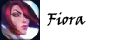
<style>
.page{position:relative;width:140px;height:40px;background:#ffffff}
.page>*{position:absolute;margin:0}
.t1{font:12px "VinerHandITC";color:#000000}
</style>
<div class="page">
<p class="t1" style="left:47px;top:12px;width:39px;height:14px">Fiora</p>
</div>
